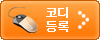
<style>
.page{position:relative;width:100px;height:40px}
.page>*{position:absolute;margin:0}
.t1{font:12px/14px "Dotum";letter-spacing:-0.075em;color:#ffffff;font-weight:bold}
</style>
<div class="page">
<p class="t1" style="left:46px;top:7px;width:23px;height:25px">코디<br>등록</p>
</div>
